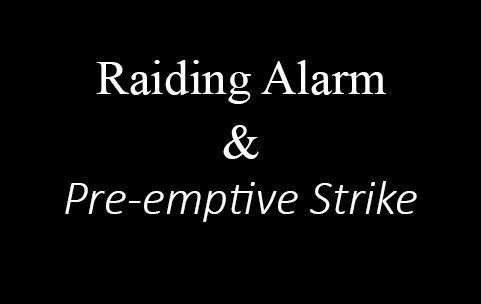
<style>
.page{position:relative;width:481px;height:304px;background:#000000}
.page>*{position:absolute;margin:0}
.t1{font:49px "TimesNewRomanPSMT";color:#ffffff}
.t2{font:49px "Calibri-LightItalic";color:#ffffff}
</style>
<div class="page">
<p class="t1" style="left:96px;top:60px;width:290px;height:44px">Raiding Alarm</p>
<p class="t1" style="left:223px;top:125px;width:36px;height:34px">&amp;</p>
<p class="t2" style="left:65px;top:181px;width:352px;height:41px">Pre-emptive Strike</p>
</div>
